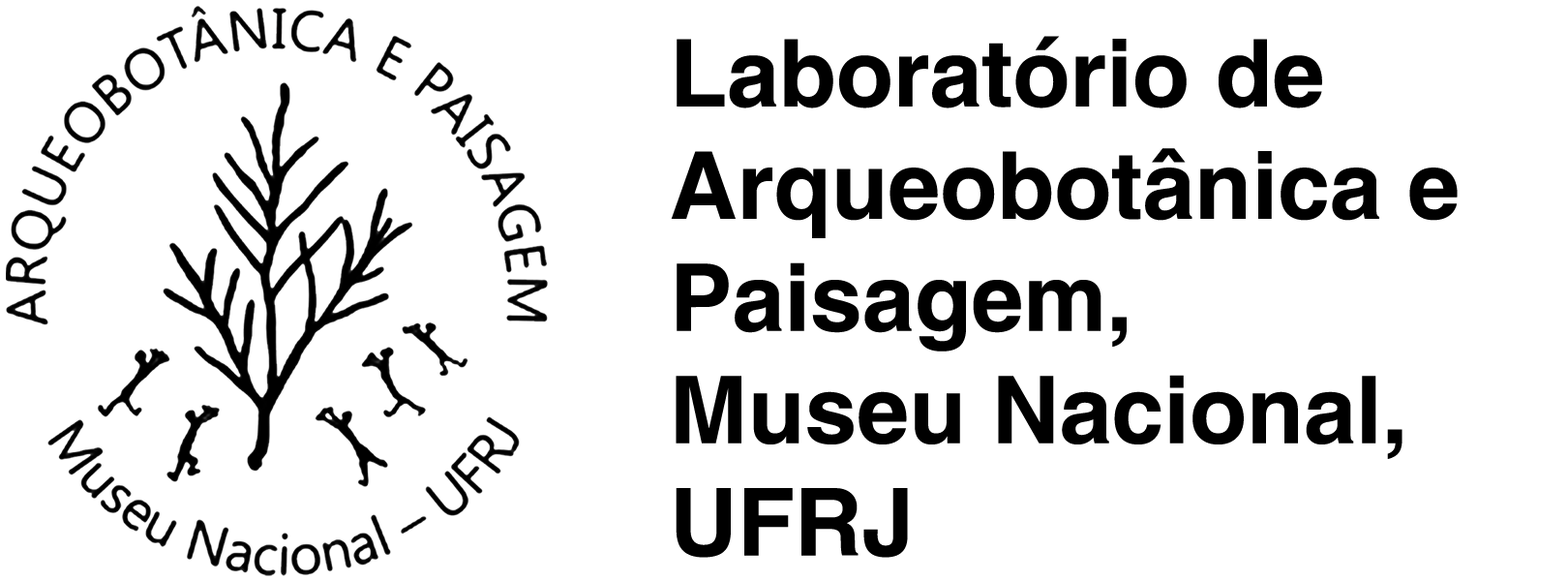
<style>
.page{position:relative;width:1568px;height:581px;background:#ffffff}
.page>*{position:absolute;margin:0}
.t1{font:93.5px "Helvetica-Bold";color:#000000}
</style>
<div class="page">
<p class="t1" style="left:671px;top:36px;width:787px;height:522px;text-align:right">Laboratório de<br>Arqueobotânica e <br>Paisagem, <br>Museu Nacional,<br>UFRJ</p>
</div>
